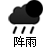
<style>
.page{position:relative;width:50px;height:48px;background:#ffffff}
.page>*{position:absolute;margin:0}
.t1{font:12px "OPPOSans-R";color:#000000}
</style>
<div class="page">
<p class="t1" style="left:14px;top:36px;width:22px;height:11px">阵雨</p>
</div>
